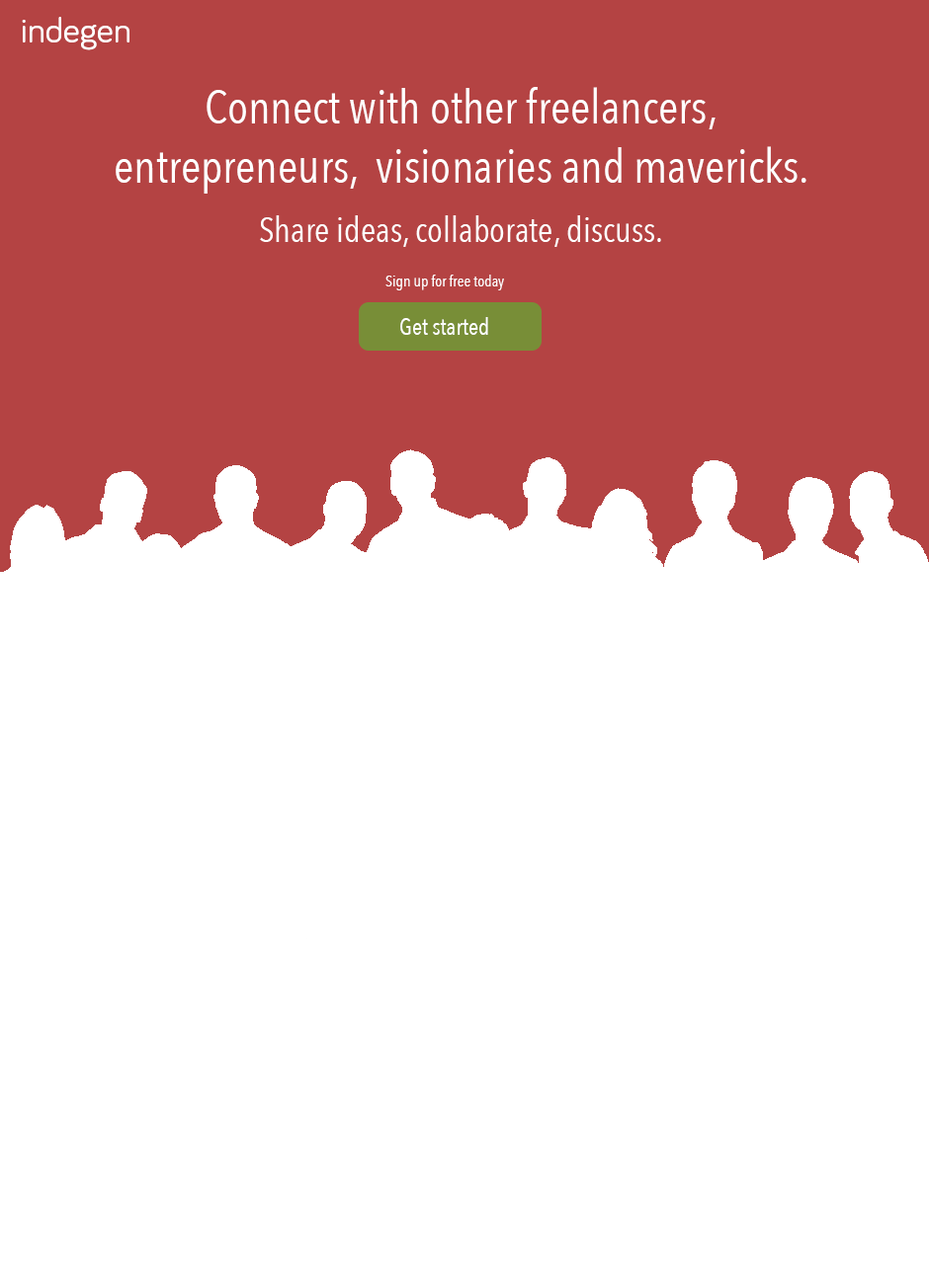
<style>
.page{position:relative;width:929px;height:1284px;background:#ffffff}
.page>*{position:absolute;margin:0}
.t1{font:35.6px "Bariol-Regular";color:#ffffff}
.t2{font:47.4px/59.3px "AvenirNextCondensed-Regular";color:#ffffff}
.t3{font:35.6px/59.3px "AvenirNextCondensed-Regular";color:#ffffff}
.t4{font:15.8px "AvenirNextCondensed-Regular";color:#ffffff}
.t5{font:23.7px "AvenirNextCondensed-Regular";color:#ffffff}
</style>
<div class="page">
<p class="t1" style="left:22px;top:17px;width:107px;height:33px">indegen</p>
<p class="t2" style="left:116px;top:87px;width:690px;height:160px;text-align:center">Connect with other freelancers, entrepreneurs,  visionaries and mavericks. <span class="t3">Share ideas, collaborate, discuss.</span></p>
<p class="t4" style="left:385px;top:275px;width:119px;height:15px">Sign up for free today</p>
<p class="t5" style="left:400px;top:317px;width:88px;height:18px">Get started</p>
</div>
